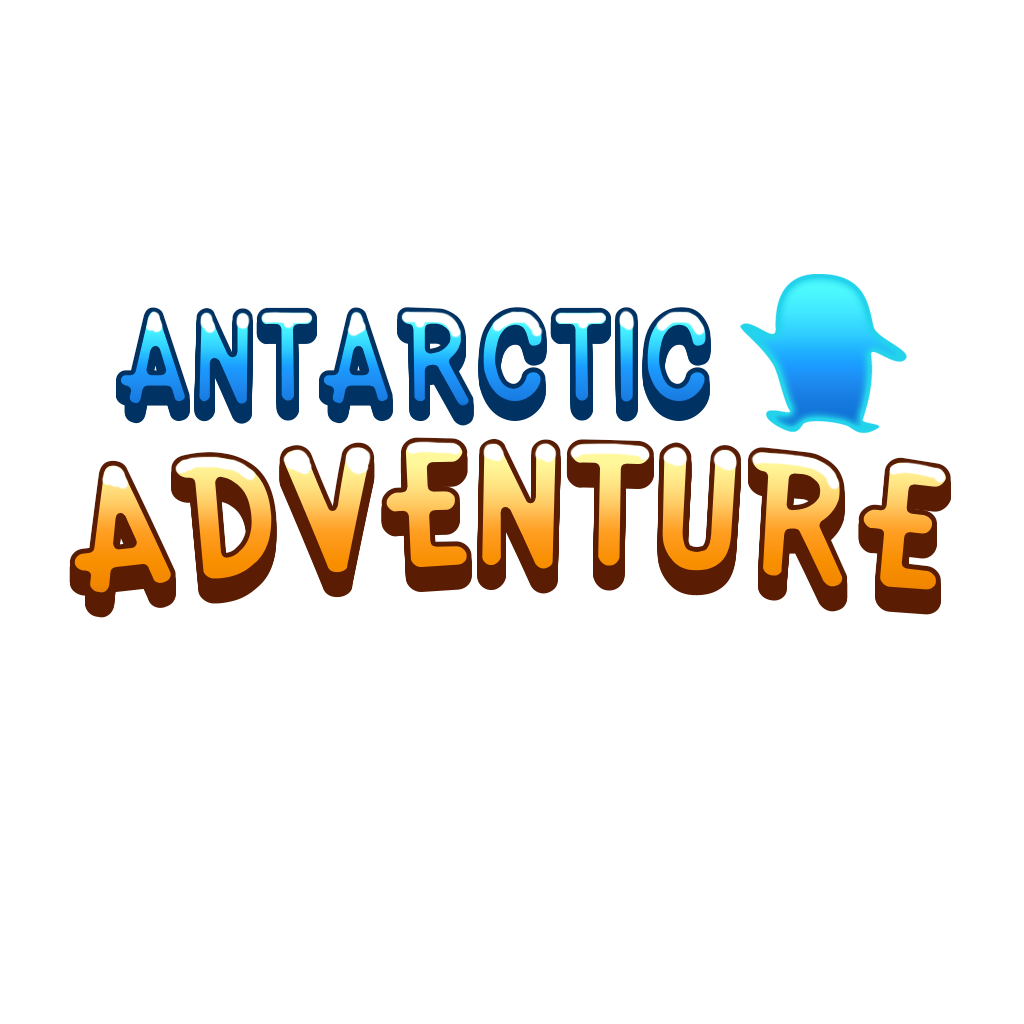
<style>
.page{position:relative;width:1024px;height:1024px;background:#ffffff}
.page>*{position:absolute;margin:0}
.t1{font:125px "KirbyClassic"}
.t2{font:166.7px "KirbyClassic"}
</style>
<div class="page">
<p class="t1" style="left:116px;top:307px;width:595px;height:104px">ANTARCTIC</p>
<p class="t2" style="left:69px;top:437px;width:882px;height:161px">ADVENTURE</p>
</div>
